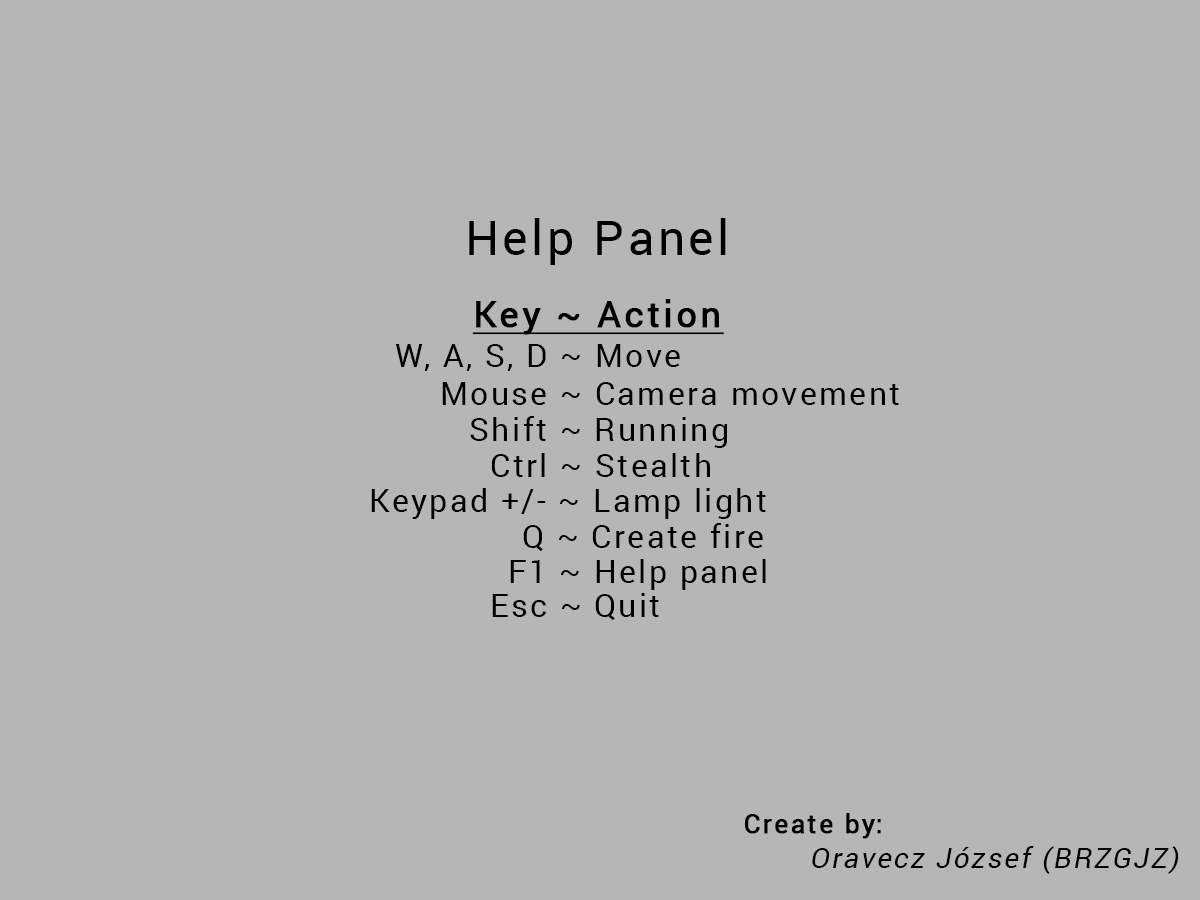
<style>
.page{position:relative;width:1200px;height:900px;background:#b6b6b6}
.page>*{position:absolute;margin:0}
.t1{font:48px "Roboto-Regular";letter-spacing:0.075em;color:#000000;font-variant:small-caps}
.t2{font:36px "Roboto-Regular";letter-spacing:0.075em;color:#000000;font-variant:small-caps;font-weight:bold;text-decoration:underline}
.t3{font:32px "Roboto-Regular";letter-spacing:0.075em;color:#000000;font-variant:small-caps}
.t4{font:26px "Roboto-Regular";letter-spacing:0.075em;color:#000000;font-variant:small-caps;font-weight:bold}
.t5{font:28px "Roboto-Regular";letter-spacing:0.075em;color:#000000;font-variant:small-caps;font-style:italic}
</style>
<div class="page">
<p class="t1" style="left:469px;top:218px;width:257px;height:47px">Help Panel</p>
<p class="t2" style="left:472px;top:299px;width:252px;height:36px">Key ~ Action</p>
<p class="t3" style="left:395px;top:344px;width:285px;height:27px">W, A, S, D ~ Move</p>
<p class="t3" style="left:442px;top:382px;width:457px;height:23px">Mouse ~ Camera movement</p>
<p class="t3" style="left:470px;top:416px;width:257px;height:32px">Shift ~ Running</p>
<p class="t3" style="left:491px;top:453px;width:219px;height:24px">Ctrl ~ Stealth</p>
<p class="t3" style="left:371px;top:488px;width:395px;height:31px">Keypad +/- ~ Lamp light</p>
<p class="t3" style="left:523px;top:523px;width:240px;height:29px">Q ~ Create fire</p>
<p class="t3" style="left:510px;top:559px;width:256px;height:31px">F1 ~ Help panel</p>
<p class="t3" style="left:492px;top:593px;width:167px;height:28px">Esc ~ Quit</p>
<p class="t4" style="left:745px;top:813px;width:136px;height:26px">Create by:</p>
<p class="t5" style="left:812px;top:846px;width:367px;height:28px">Oravecz József (BRZGJZ)</p>
</div>
